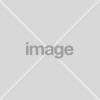
<style>
.page{position:relative;width:100px;height:100px;background:#d8d8d8}
.page>*{position:absolute;margin:0}
.t1{font:18px "Helvetica75-Bold";letter-spacing:-0.05em;color:#9d9d9d}
</style>
<div class="page">
<p class="t1" style="left:26px;top:42px;width:48px;height:17px">image</p>
</div>
